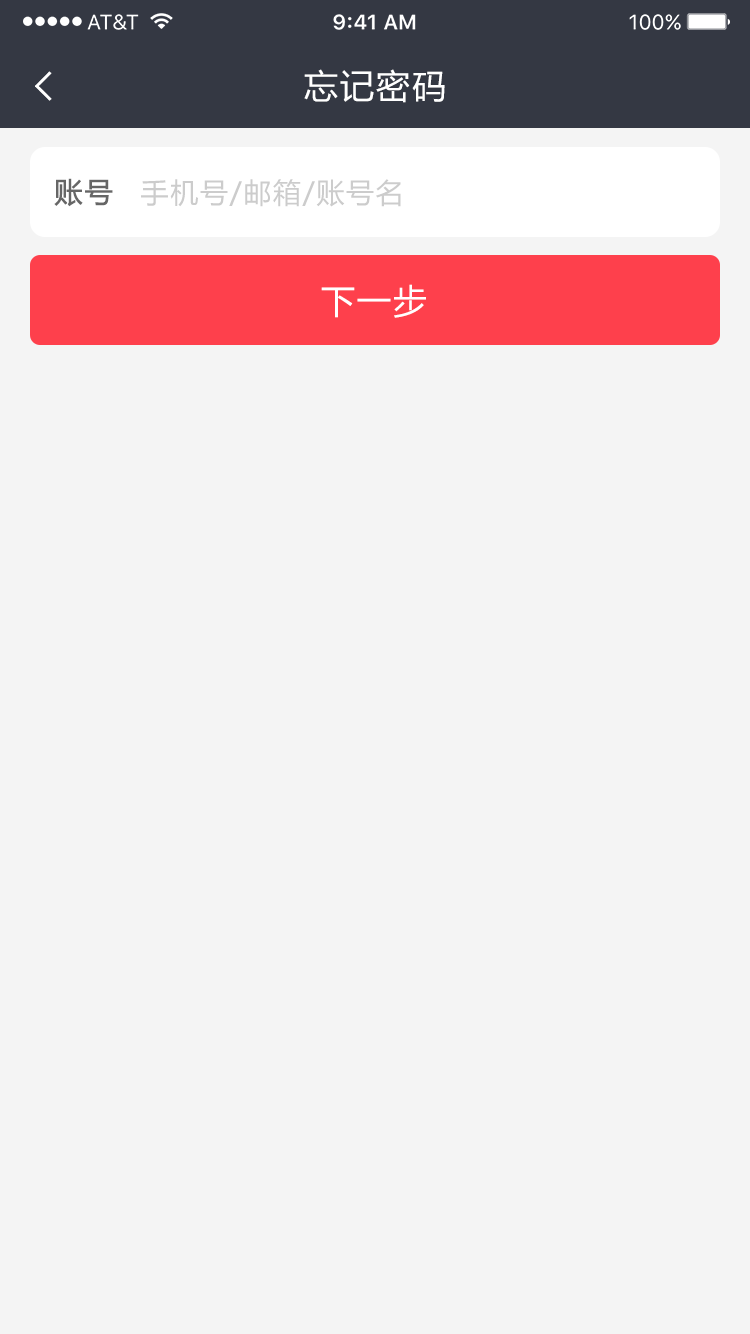
<style>
.page{position:relative;width:750px;height:1334px;background:#f4f4f4}
.page>*{position:absolute;margin:0}
.t1{font:34px "MicrosoftYaHei";letter-spacing:0.06em;color:#ffffff}
.t2{font:28px "MicrosoftYaHei";letter-spacing:0.06em;color:#666666;font-weight:bold}
.t3{font:28px "MicrosoftYaHei";letter-spacing:0.06em;color:#cccccc}
</style>
<div class="page">
<p class="t1" style="left:304px;top:69px;width:141px;height:34px">忘记密码</p>
<p class="t2" style="left:54px;top:178px;width:59px;height:29px">账号</p>
<p class="t3" style="left:141px;top:179px;width:260px;height:28px">手机号/邮箱/账号名</p>
<p class="t1" style="left:321px;top:284px;width:105px;height:34px">下一步</p>
</div>
